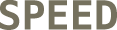
<style>
.page{position:relative;width:117px;height:30px;background:#ffffff}
.page>*{position:absolute;margin:0}
.t1{font:40px "Menlo-Bold";color:#75715e}
</style>
<div class="page">
<p class="t1" style="left:0px;top:0px;width:117px;height:30px">SPEED</p>
</div>
